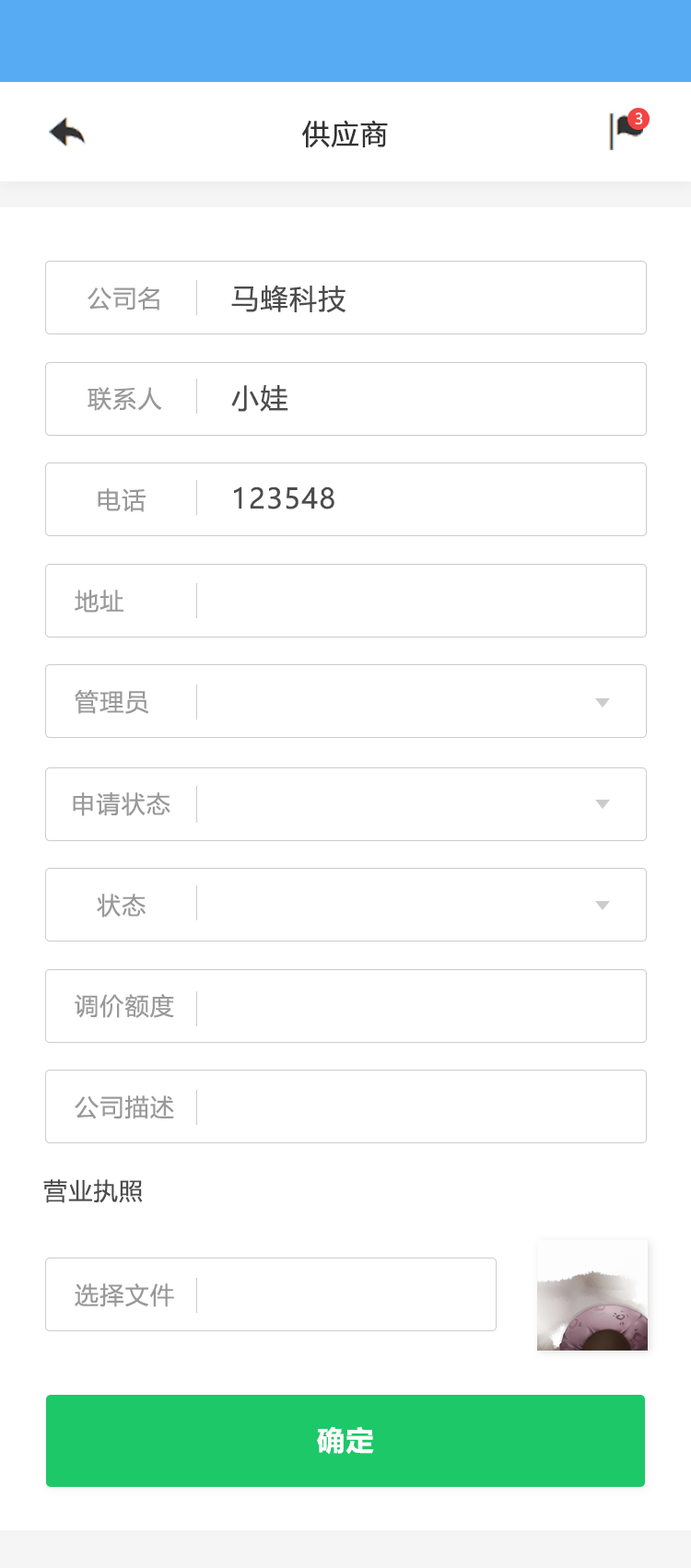
<style>
.page{position:relative;width:691px;height:1568px;background:#ffffff}
.page>*{position:absolute;margin:0}
.t1{font:14.7px "MicrosoftYaHeiUI";color:#ffffff}
.t2{font:27.6px "MicrosoftYaHeiUI";letter-spacing:0.05em;color:#333333}
.t3{font:24px "MicrosoftYaHeiUI";letter-spacing:0.05em;color:#999999}
.t4{font:27.6px "MicrosoftYaHeiUI";letter-spacing:0.05em;color:#4c4c4c}
.t5{font:24px "MicrosoftYaHeiUI";letter-spacing:0.05em;color:#4c4c4c}
.t6{font:27.6px "MicrosoftYaHeiUI-Bold";letter-spacing:0.05em;color:#ffffff}
</style>
<div class="page">
<p class="t1" style="left:635px;top:112px;width:8px;height:12px">3</p>
<p class="t2" style="left:302px;top:120px;width:86px;height:27px">供应商</p>
<p class="t3" style="left:88px;top:287px;width:71px;height:23px">公司名</p>
<p class="t4" style="left:231px;top:285px;width:115px;height:28px">马蜂科技</p>
<p class="t3" style="left:88px;top:387px;width:74px;height:24px">联系人</p>
<p class="t4" style="left:231px;top:385px;width:57px;height:27px">小娃</p>
<p class="t3" style="left:98px;top:488px;width:48px;height:24px">电话</p>
<p class="t4" style="left:234px;top:486px;width:100px;height:23px">123548</p>
<p class="t3" style="left:75px;top:590px;width:48px;height:23px">地址</p>
<p class="t3" style="left:75px;top:690px;width:74px;height:24px">管理员</p>
<p class="t3" style="left:73px;top:792px;width:97px;height:24px">申请状态</p>
<p class="t3" style="left:97px;top:894px;width:49px;height:24px">状态</p>
<p class="t3" style="left:75px;top:994px;width:99px;height:24px">调价额度</p>
<p class="t3" style="left:75px;top:1095px;width:99px;height:24px">公司描述</p>
<p class="t5" style="left:43px;top:1179px;width:100px;height:24px">营业执照</p>
<p class="t3" style="left:75px;top:1283px;width:99px;height:24px">选择文件</p>
<p class="t6" style="left:317px;top:1426px;width:57px;height:29px">确定</p>
</div>
